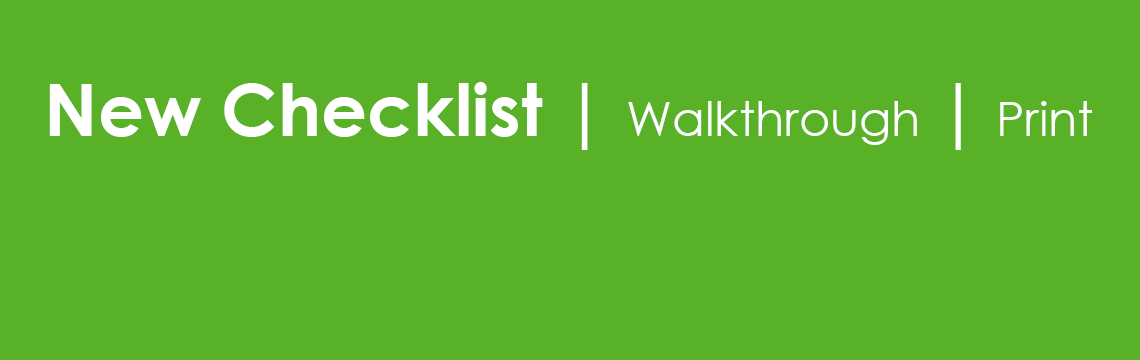
<style>
.page{position:relative;width:1140px;height:360px;background:#58b127}
.page>*{position:absolute;margin:0}
.t1{font:72px "CenturyGothic-Bold";color:#ffffff}
.t2{font:48px "CenturyGothic";color:#ffffff}
.t3{font:72px "CenturyGothic";color:#ffffff}
</style>
<div class="page">
<p class="t1" style="left:49px;top:82px;width:1043px;height:68px">New Checklist | <span class="t2">Walkthrough </span><span class="t3">|</span><span class="t2"> Print</span></p>
</div>
